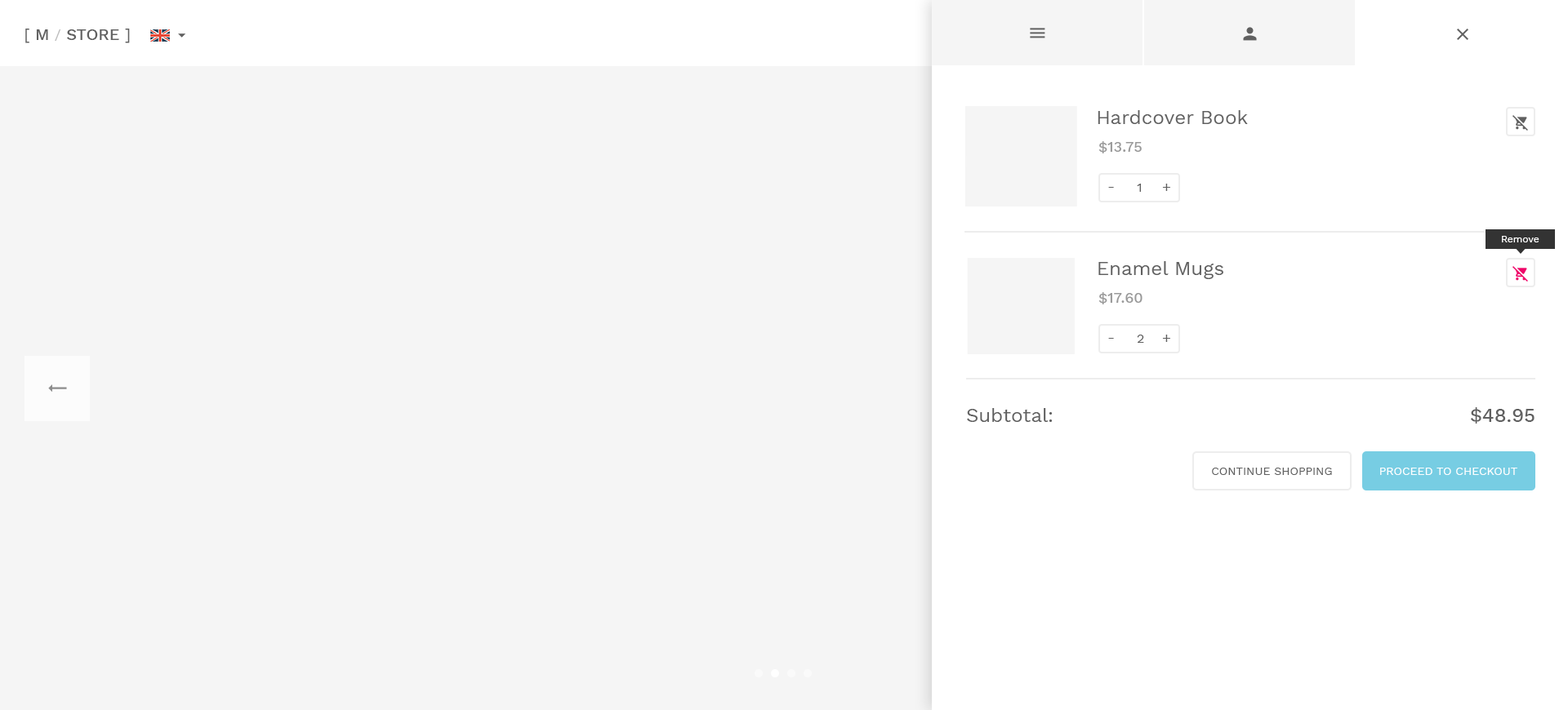
<style>
.page{position:relative;width:1568px;height:710px;background:#f5f5f5}
.page>*{position:absolute;margin:0}
.t1{font:16.3px "WorkSans-Medium";color:#606060}
.t2{font:16.3px "WorkSans-Regular";color:#606060}
.t3{font:14.7px "WorkSans-Regular";color:#bababa}
.t4{font:19.6px "WorkSans-Regular";color:#606060}
.t5{font:14.7px "WorkSans-Medium";color:#999999}
.t6{font:13.1px "WorkSans-Regular";color:#606060}
.t7{font:14.7px "WorkSans-Regular";color:#606060}
.t8{font:9.8px "WorkSans-Regular";color:#ffffff}
.t9{font:19.6px "WorkSans-Medium";color:#606060}
.t10{font:11.4px "WorkSans-Regular";color:#606060;text-transform:uppercase}
.t11{font:11.4px "WorkSans-Regular";color:#ffffff;text-transform:uppercase}
</style>
<div class="page">
<p class="t1" style="left:25px;top:29px;width:105px;height:14px"><span class="t2">[</span> M <span class="t3">/ </span>STORE <span class="t2">]</span></p>
<p class="t4" style="left:1098px;top:110px;width:150px;height:14px">Hardcover Book</p>
<p class="t5" style="left:1098px;top:141px;width:44px;height:13px">$13.75</p>
<p class="t6" style="left:1137px;top:184px;width:4px;height:8px">1</p>
<p class="t7" style="left:1162px;top:184px;width:8px;height:7px">+</p>
<p class="t7" style="left:1108px;top:187px;width:6px;height:1px">-</p>
<p class="t8" style="left:1502px;top:236px;width:37px;height:7px">Remove</p>
<p class="t4" style="left:1098px;top:261px;width:125px;height:18px">Enamel Mugs</p>
<p class="t5" style="left:1098px;top:292px;width:45px;height:13px">$17.60</p>
<p class="t7" style="left:1108px;top:338px;width:6px;height:1px">-</p>
<p class="t6" style="left:1137px;top:335px;width:7px;height:8px">2</p>
<p class="t7" style="left:1162px;top:335px;width:8px;height:7px">+</p>
<p class="t4" style="left:967px;top:408px;width:86px;height:14px">Subtotal:</p>
<p class="t9" style="left:1471px;top:408px;width:64px;height:16px">$48.95</p>
<p class="t10" style="left:1212px;top:468px;width:120px;height:7px">Continue Shopping</p>
<p class="t11" style="left:1380px;top:468px;width:137px;height:7px">Proceed to Checkout</p>
</div>
